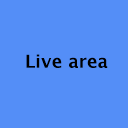
<style>
.page{position:relative;width:128px;height:128px;background:#548ef7}
.page>*{position:absolute;margin:0}
.t1{font:18px "LucidaGrande-Bold";color:#000000}
</style>
<div class="page">
<p class="t1" style="left:26px;top:54px;width:82px;height:14px">Live area</p>
</div>
